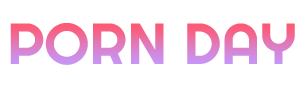
<style>
.page{position:relative;width:302px;height:86px;background:#ffffff}
.page>*{position:absolute;margin:0}
.t1{font:58px "Righteous-Regular"}
</style>
<div class="page">
<p class="t1" style="left:10px;top:23px;width:285px;height:42px">PORN DAY</p>
</div>
